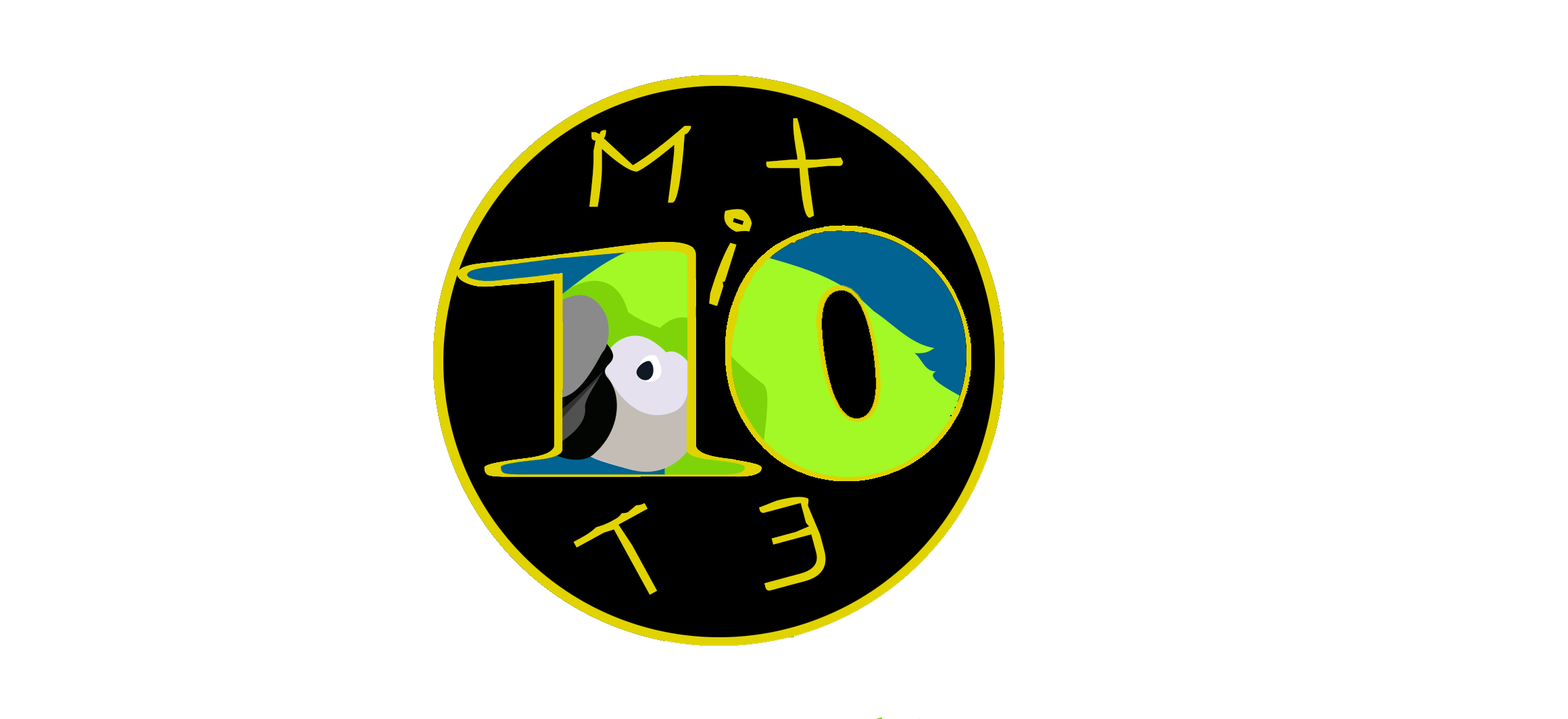
<style>
.page{position:relative;width:1568px;height:719px;background:#ffffff}
.page>*{position:absolute;margin:0}
.t1{font:135.2px "alliewriting!";color:#e1d300}
</style>
<div class="page">
<p class="t1" style="left:589px;top:126px;width:102px;height:81px;rotate:180deg">M</p>
<p class="t1" style="left:766px;top:118px;width:77px;height:100px">t</p>
<p class="t1" style="left:709px;top:209px;width:43px;height:97px;rotate:17deg">i</p>
<p class="t1" style="left:759px;top:497px;width:67px;height:94px;rotate:165deg">E</p>
<p class="t1" style="left:573px;top:503px;width:85px;height:92px;rotate:-29deg">T</p>
</div>
